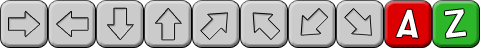
<style>
.page{position:relative;width:480px;height:48px;background:#cbcbcb}
.page>*{position:absolute;margin:0}
.t1{font:36px "southpark";color:#ffffff}
</style>
<div class="page">
<p class="t1" style="left:396px;top:9px;width:22px;height:29px">A</p>
<p class="t1" style="left:444px;top:9px;width:22px;height:29px">Z</p>
</div>
